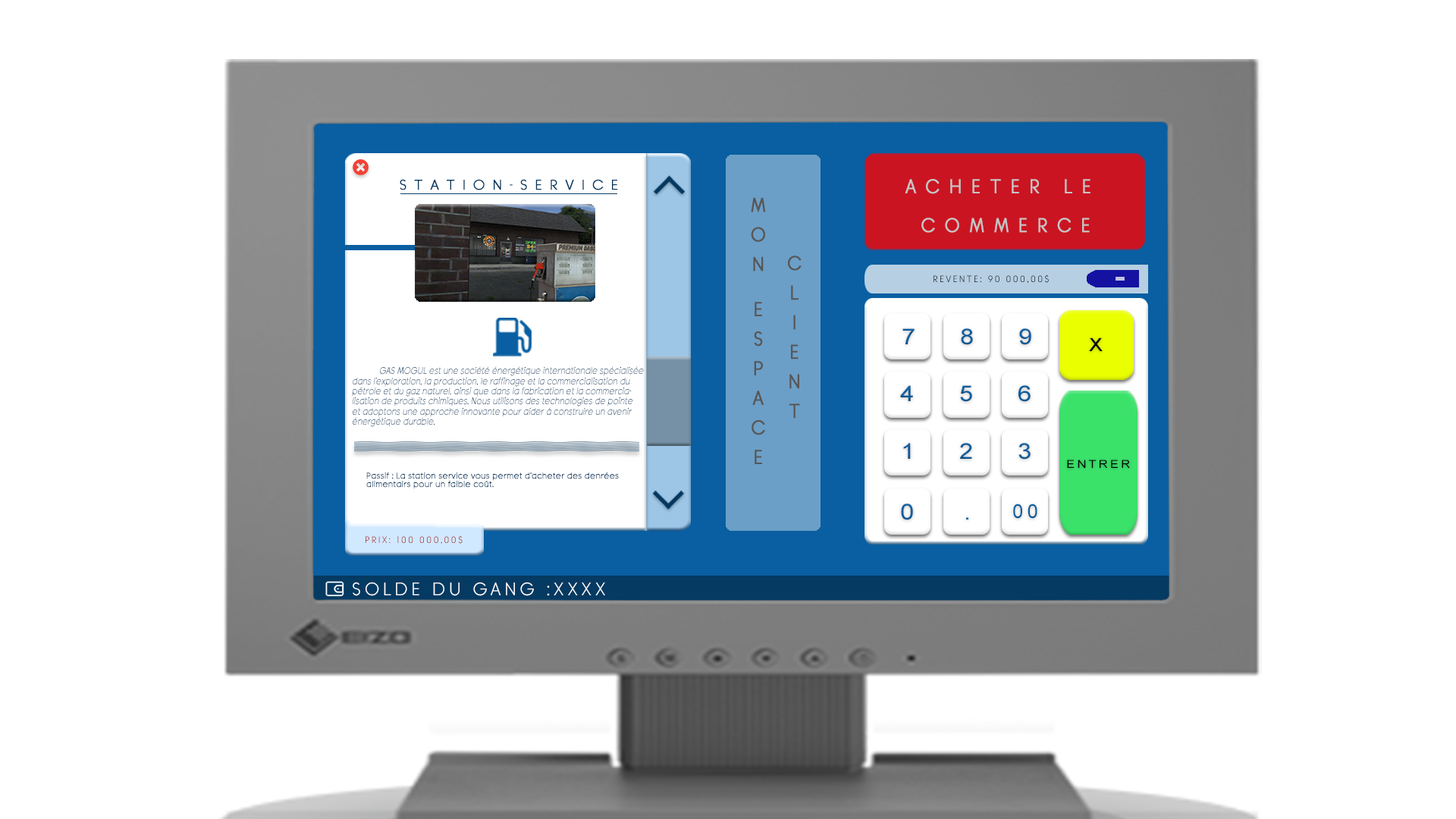
<style>
.page{position:relative;width:1456px;height:819px;background:#ffffff}
.page>*{position:absolute;margin:0}
.t1{font:14.1px "BanksMilesSingleLine";letter-spacing:0.48em;color:#053a62;font-weight:bold;scale:1.06 1}
.t2{font:19.7px/37.9px "BanksMilesSingleLine";letter-spacing:0.5em;color:#c5c5c5;font-weight:bold;scale:0.94 1}
.t3{font:9.1px "BanksMilesSingleLine";letter-spacing:0.2em;color:#000000}
.t4{font:21.8px "ArialMT";letter-spacing:0.2em;color:#095d9d;scale:1.14 1}
.t5{font:21.8px "ArialMT";letter-spacing:0.2em;color:#095fa0;scale:1.14 1}
.t6{font:18.2px "ArialMT";letter-spacing:0.2em;color:#000000;scale:1.14 1}
.t7{font:9.6px/9.1px "BanksMilesSingleLine";letter-spacing:0.01em;color:#053a62;font-style:italic;scale:0.87 1}
.t8{font:21.8px "ArialMT";letter-spacing:0.2em;color:#095b9b;scale:1.14 1}
.t9{font:21.8px "ArialMT";letter-spacing:0.2em;color:#095ea0;scale:1.14 1}
.t10{font:21.8px "ArialMT";letter-spacing:0.2em;color:#095e9f;scale:1.14 1}
.t11{font:21.8px "ArialMT";letter-spacing:0.2em;color:#095d9e;scale:1.14 1}
.t12{font:21.8px "ArialMT";letter-spacing:0.2em;color:#095e9e;scale:1.14 1}
.t13{font:10.9px "ArialMT";letter-spacing:0.2em;color:#000000;scale:1.14 1}
.t14{font:8.3px/7.6px "BanksMilesSingleLine";letter-spacing:0.01em;color:#053a62;font-weight:bold}
.t15{font:19.2px "ArialMT";letter-spacing:0.2em;color:#095fa0}
.t16{font:21.8px "ArialMT";letter-spacing:0.2em;color:#095c9c;scale:1.14 1}
.t17{font:9.1px "BanksMilesSingleLine";letter-spacing:0.2em}
.t18{font:18.2px "BanksMilesSingleLine";letter-spacing:0.2em;color:#ffffff}
</style>
<div class="page">
<p class="t1" style="left:400px;top:179px;width:218px;height:11px">STATION-SERVICE</p>
<p class="t2" style="left:905px;top:179px;width:185px;height:54px;text-align:center">ACHETER LE <br>COMMERCE</p>
<p class="t3" style="left:933px;top:275px;width:116px;height:8px">REVENTE: 90 000,00$</p>
<p class="t4" style="left:902px;top:328px;width:13px;height:16px">7</p>
<p class="t5" style="left:961px;top:328px;width:12px;height:17px">8</p>
<p class="t5" style="left:1019px;top:328px;width:12px;height:17px">9</p>
<p class="t6" style="left:1089px;top:337px;width:14px;height:14px">X</p>
<p class="t7" style="left:352px;top:366px;width:292px;height:61px">GAS MOGUL est une société énergétique internationale spécialisée <br>dans l’exploration, la production, le raffinage et la commercialisation du <br>pétrole et du gaz naturel, ainsi que dans la fabrication et la commercia-<br>lisation de produits chimiques. Nous utilisons des technologies de pointe <br>et adoptons une approche innovante pour aider à construire un avenir <br>énergétique durable.</p>
<p class="t8" style="left:900px;top:385px;width:13px;height:16px">4</p>
<p class="t9" style="left:960px;top:385px;width:12px;height:17px">5</p>
<p class="t10" style="left:1018px;top:385px;width:13px;height:17px">6</p>
<p class="t11" style="left:903px;top:443px;width:8px;height:16px">1</p>
<p class="t12" style="left:960px;top:443px;width:12px;height:16px">2</p>
<p class="t9" style="left:1018px;top:443px;width:13px;height:17px">3</p>
<p class="t13" style="left:1067px;top:460px;width:63px;height:8px">ENTRER</p>
<p class="t14" style="left:366px;top:472px;width:253px;height:17px">Passif : La station service vous permet d’acheter des denrées<br>alimentairs pour un faible coût.</p>
<p class="t5" style="left:901px;top:504px;width:12px;height:16px">0</p>
<p class="t15" style="left:1013px;top:504px;width:24px;height:15px">00</p>
<p class="t16" style="left:966px;top:517px;width:2px;height:2px">.</p>
<p class="t17" style="left:366px;top:535px;width:97px;height:9px">PRIX: 100 000,00$</p>
<p class="t18" style="left:353px;top:582px;width:252px;height:14px">SOLDE DU GANG :XXXX</p>
</div>
